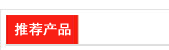
<style>
.page{position:relative;width:169px;height:50px;background:#ffffff}
.page>*{position:absolute;margin:0}
.t1{font:14px "SimHei";color:#ffffff;font-weight:bold}
</style>
<div class="page">
<p class="t1" style="left:14px;top:22px;width:57px;height:14px">推荐产品</p>
</div>
